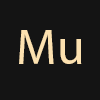
<style>
.page{position:relative;width:100px;height:100px;background:#141414}
.page>*{position:absolute;margin:0}
.t1{font:50px "MyriadPro-Regular";color:#fce1b0}
</style>
<div class="page">
<p class="t1" style="left:19px;top:30px;width:63px;height:34px">Mu</p>
</div>
